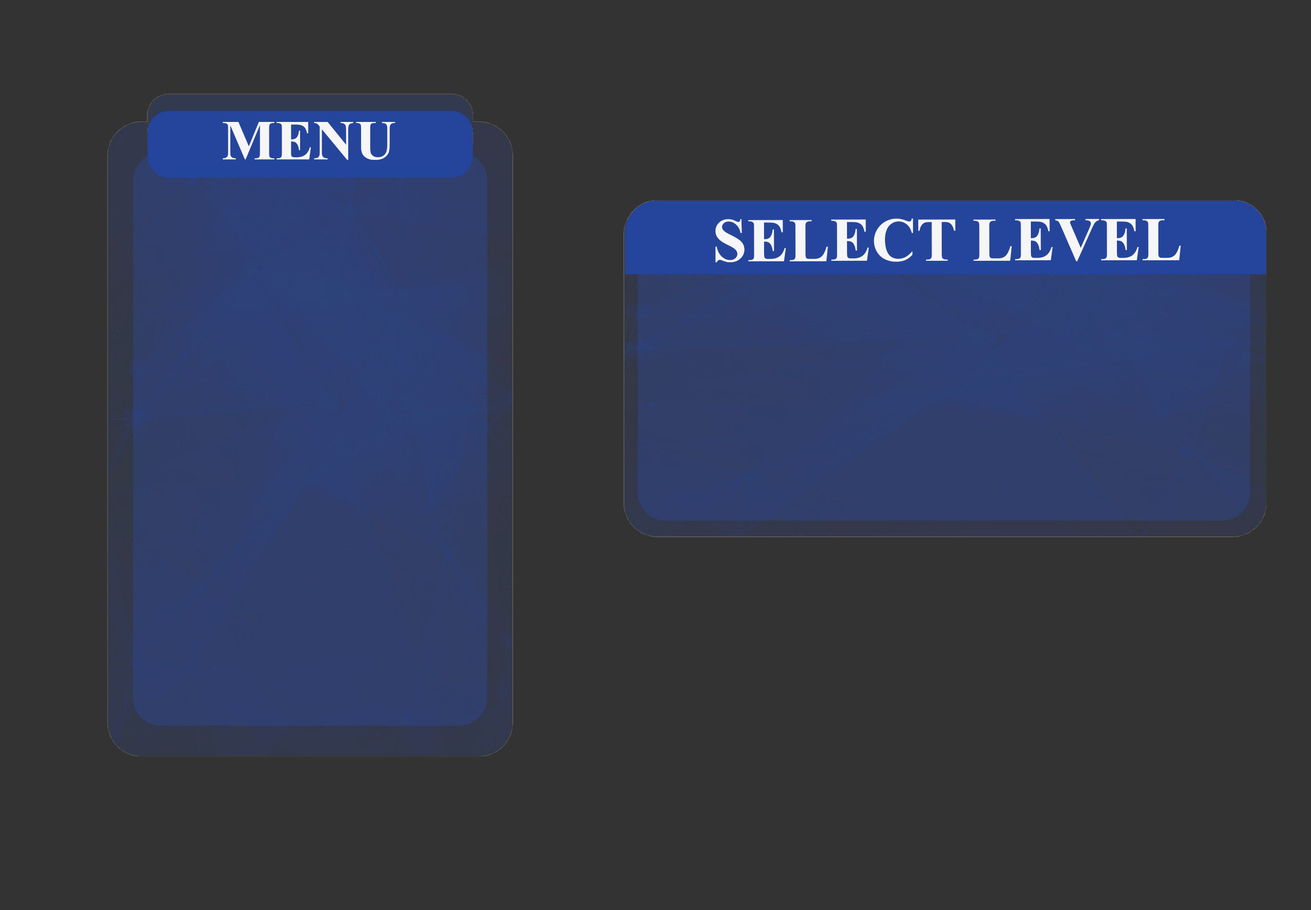
<style>
.page{position:relative;width:1311px;height:910px;background:#333333}
.page>*{position:absolute;margin:0}
.t1{font:57.1px "TimesNewRomanPS-BoldMT";color:#f6f6f6}
.t2{font:62.2px "TimesNewRomanPS-BoldMT";color:#f6f6f6}
</style>
<div class="page">
<p class="t1" style="left:223px;top:122px;width:172px;height:38px">MENU</p>
<p class="t2" style="left:715px;top:218px;width:466px;height:44px">SELECT LEVEL</p>
</div>
